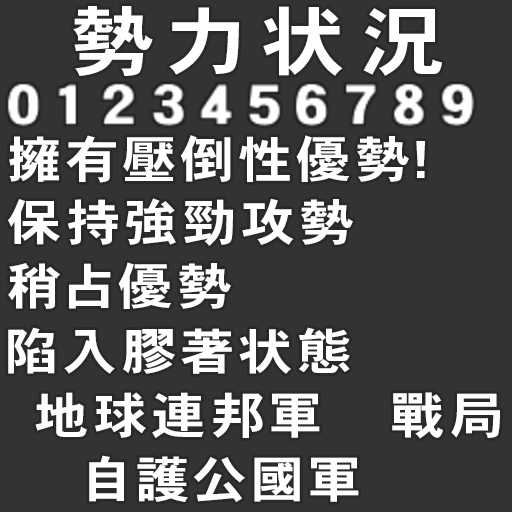
<style>
.page{position:relative;width:512px;height:512px;background:#333333}
.page>*{position:absolute;margin:0}
.t1{font:77px "HeiseiKakuGoStd-W7";letter-spacing:0.2em;color:#ffffff;scale:1.09 1}
.t2{font:50px "HeiseiKakuGoStd-W7";letter-spacing:0.096em;color:#ffffff;scale:1.09 1}
</style>
<div class="page">
<p class="t1" style="left:73px;top:6px;width:369px;height:70px">勢力状況</p>
<p class="t2" style="left:9px;top:135px;width:416px;height:48px">擁有壓倒性優勢!</p>
<p class="t2" style="left:8px;top:198px;width:345px;height:48px">保持強勁攻勢</p>
<p class="t2" style="left:8px;top:262px;width:223px;height:47px">稍占優勢</p>
<p class="t2" style="left:8px;top:327px;width:342px;height:47px">陷入膠著状態</p>
<p class="t2" style="left:35px;top:392px;width:285px;height:46px">地球連邦軍</p>
<p class="t2" style="left:392px;top:392px;width:108px;height:47px">戰局</p>
<p class="t2" style="left:89px;top:455px;width:270px;height:47px">自護公國軍</p>
</div>
